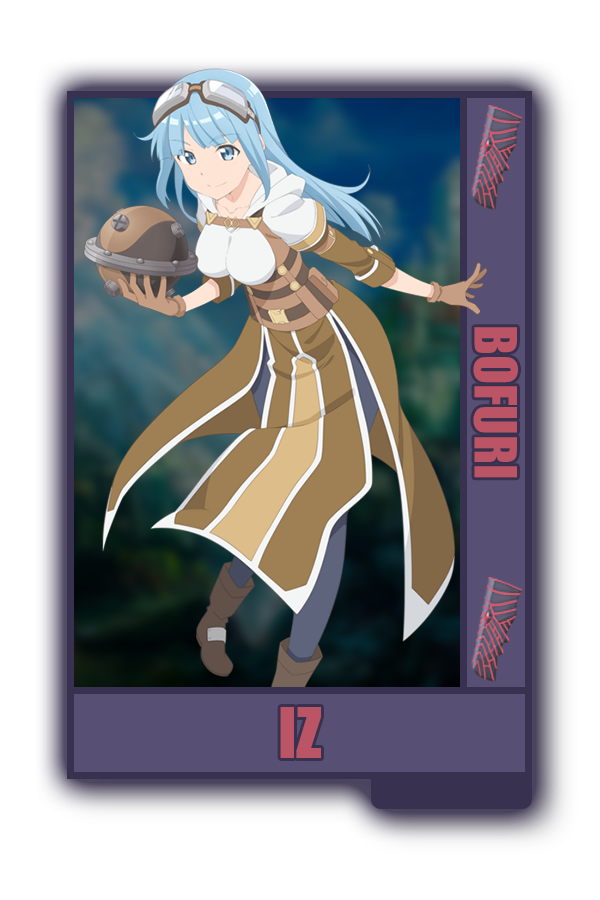
<style>
.page{position:relative;width:600px;height:900px;background:#ffffff}
.page>*{position:absolute;margin:0}
.t1{font:53.6px "Impact";color:#bb5464}
.t2{font:64.6px "Impact";color:#bb5464}
</style>
<div class="page">
<p class="t1" style="left:473px;top:327px;width:45px;height:151px;rotate:90deg">BOFURI</p>
<p class="t2" style="left:280px;top:707px;width:41px;height:51px">IZ</p>
</div>
